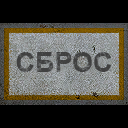
<style>
.page{position:relative;width:128px;height:128px;background:#000000}
.page>*{position:absolute;margin:0}
.t1{font:27px "Arial-BoldMT";color:#404040}
</style>
<div class="page">
<p class="t1" style="left:16px;top:52px;width:95px;height:20px">СБРОС</p>
</div>
